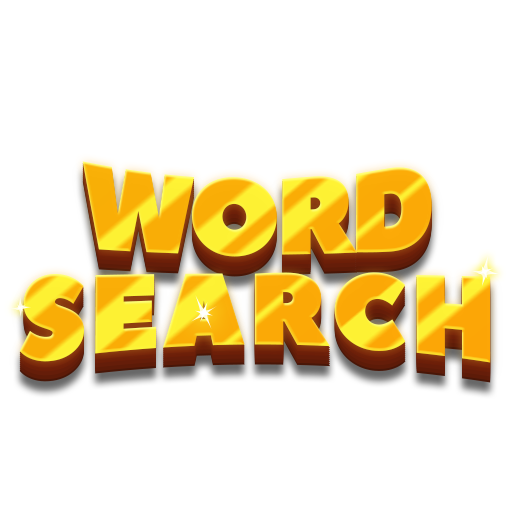
<style>
.page{position:relative;width:512px;height:512px;background:#ffffff}
.page>*{position:absolute;margin:0}
.t1{font:124.6px "PeaceSans";letter-spacing:-0.05em;scale:0.87 1}
.t2{font:124.6px "PeaceSans";letter-spacing:0.025em;scale:0.87 1}
</style>
<div class="page">
<p class="t1" style="left:82px;top:161px;width:350px;height:96px">WORD</p>
<p class="t2" style="left:19px;top:272px;width:472px;height:91px">SEARCH</p>
</div>
